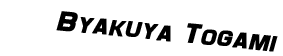
<style>
.page{position:relative;width:283px;height:56px;background:#ffffff}
.page>*{position:absolute;margin:0}
.t1{font:28px "Maximus";color:#000000;font-weight:bold;font-style:italic}
</style>
<div class="page">
<p class="t1" style="left:56px;top:11px;width:222px;height:41px;rotate:6deg">Byakuya Togami</p>
</div>
